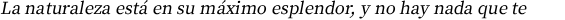
<style>
.page{position:relative;width:565px;height:20px;background:#ffffff}
.page>*{position:absolute;margin:0}
.t1{font:20px "OfficialFateFont-Medium";color:#000000;font-style:italic}
</style>
<div class="page">
<p class="t1" style="left:0px;top:0px;width:527px;height:19px">La naturaleza está en su máximo esplendor, y no hay nada que te</p>
</div>
